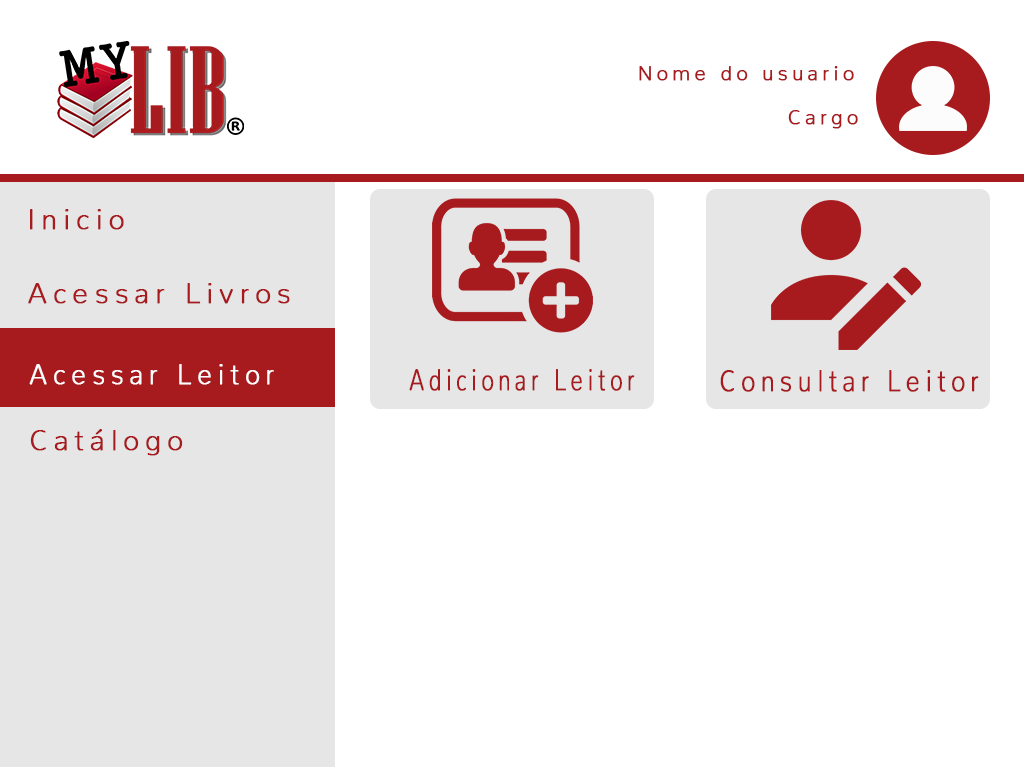
<style>
.page{position:relative;width:1024px;height:768px;background:#ffffff}
.page>*{position:absolute;margin:0}
.t1{font:20px "Nunito-ExtraLight";letter-spacing:0.2em;color:#a71b1e;font-weight:bold}
.t2{font:28px "Nunito-ExtraLight";letter-spacing:0.2em;color:#a71b1e;font-weight:bold}
.t3{font:28px "Nunito-ExtraLight";letter-spacing:0.2em;color:#fffefe;font-weight:bold;scale:0.94 1}
.t4{font:30.5px "Nunito-ExtraLight";letter-spacing:0.2em;color:#a71b1e;font-weight:bold;scale:0.71 1}
.t5{font:30.5px "Nunito-ExtraLight";letter-spacing:0.2em;color:#a71b1e;font-weight:bold;scale:0.81 1}
</style>
<div class="page">
<p class="t1" style="left:639px;top:66px;width:215px;height:15px">Nome do usuario</p>
<p class="t1" style="left:788px;top:110px;width:70px;height:19px">Cargo</p>
<p class="t2" style="left:30px;top:209px;width:94px;height:21px">Inicio</p>
<p class="t2" style="left:28px;top:283px;width:262px;height:21px">Acessar Livros</p>
<p class="t3" style="left:29px;top:364px;width:245px;height:21px">Acessar Leitor</p>
<p class="t4" style="left:409px;top:369px;width:226px;height:22px">Adicionar Leitor</p>
<p class="t5" style="left:720px;top:370px;width:259px;height:22px">Consultar Leitor</p>
<p class="t2" style="left:30px;top:429px;width:153px;height:27px">Catálogo</p>
</div>
